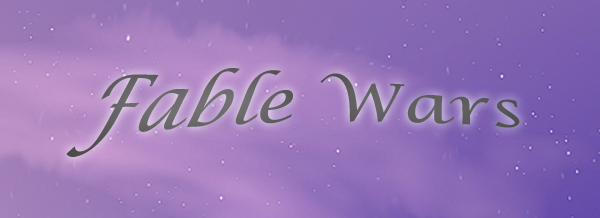
<style>
.page{position:relative;width:600px;height:218px}
.page>*{position:absolute;margin:0}
.t1{font:71.9px "LucidaCalligraphy-Italic";color:#626262}
</style>
<div class="page">
<p class="t1" style="left:66px;top:68px;width:454px;height:89px">Fable Wars</p>
</div>
